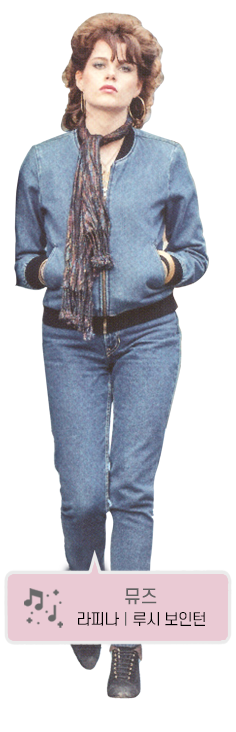
<style>
.page{position:relative;width:236px;height:732px;background:#ffffff}
.page>*{position:absolute;margin:0}
.t1{font:17.5px "S-CoreDream-5Medium";color:#636363}
.t2{font:15.4px "S-CoreDream-4Regular";letter-spacing:-0.05em;color:#000000}
.t3{font:15.4px "S-CoreDream-4Regular";letter-spacing:-0.05em;color:#636363}
</style>
<div class="page">
<p class="t1" style="left:125px;top:588px;width:32px;height:17px">뮤즈</p>
<p class="t2" style="left:78px;top:612px;width:127px;height:14px">라피나<span class="t3">ㅣ</span>루시 보인턴</p>
</div>
